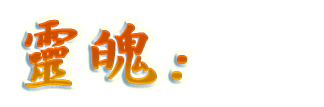
<style>
.page{position:relative;width:324px;height:107px;background:#ffffff}
.page>*{position:absolute;margin:0}
.t1{font:72px "DFXingShu-Bd-HK-BF";font-weight:bold}
</style>
<div class="page">
<p class="t1" style="left:24px;top:19px;width:164px;height:69px">靈魄:</p>
</div>
